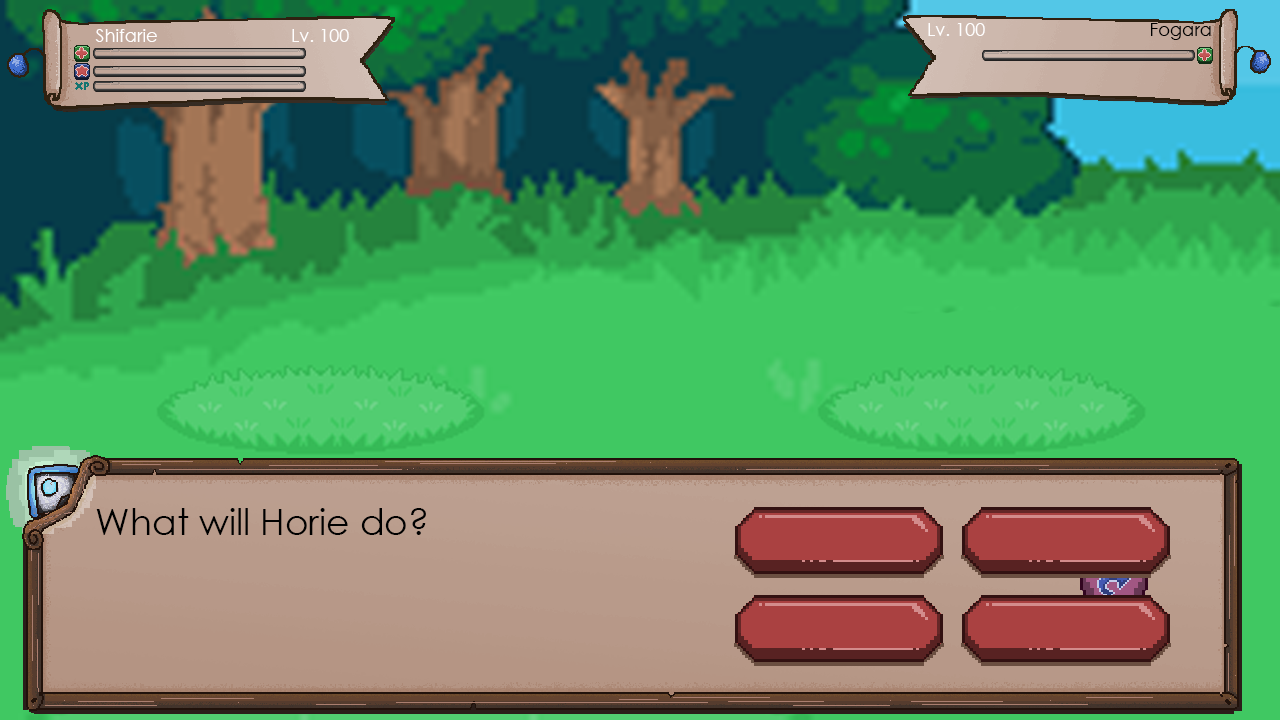
<style>
.page{position:relative;width:1280px;height:720px}
.page>*{position:absolute;margin:0}
.t1{font:18px "CenturyGothic";color:#fffefe}
.t2{font:18px "CenturyGothic";color:#000000}
.t3{font:36px "CenturyGothic";color:#000000}
</style>
<div class="page">
<p class="t1" style="left:95px;top:29px;width:62px;height:13px">Shifarie</p>
<p class="t1" style="left:292px;top:29px;width:57px;height:13px">Lv. 100</p>
<p class="t1" style="left:928px;top:23px;width:57px;height:13px">Lv. 100</p>
<p class="t2" style="left:1151px;top:23px;width:60px;height:17px">Fogara</p>
<p class="t3" style="left:96px;top:508px;width:330px;height:27px">What will Horie do?</p>
</div>
